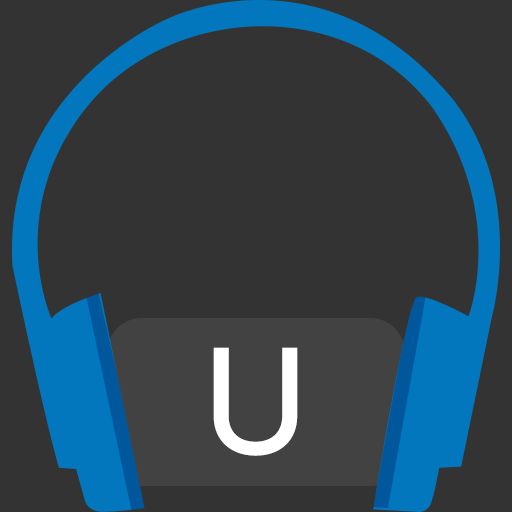
<style>
.page{position:relative;width:512px;height:512px;background:#333333}
.page>*{position:absolute;margin:0}
.t1{font:150px "MuseoSansCyrl-500";letter-spacing:-0.04em;color:#ffffff}
</style>
<div class="page">
<p class="t1" style="left:213px;top:347px;width:85px;height:109px">U</p>
</div>
